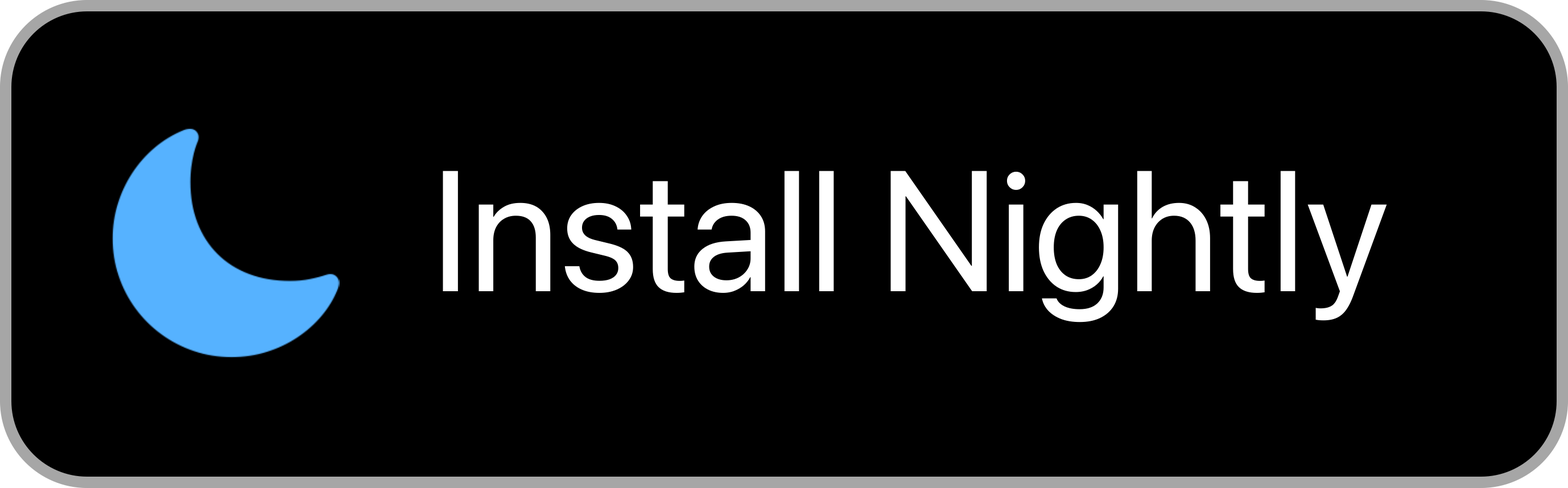
<style>
.page{position:relative;width:1568px;height:488px;background:#000000}
.page>*{position:absolute;margin:0}
.t1{font:170.7px "SFPro-Regular";color:#ffffff}
</style>
<div class="page">
<p class="t1" style="left:443px;top:171px;width:944px;height:152px">Install Nightly</p>
</div>
